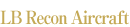
<style>
.page{position:relative;width:130px;height:27px;background:#ffffff}
.page>*{position:absolute;margin:0}
.t1{font:18px "RyuminPro-ExBold";letter-spacing:-0.08em;color:#c4a956;scale:0.92 1}
</style>
<div class="page">
<p class="t1" style="left:0px;top:10px;width:129px;height:15px">LB Recon Aircraft</p>
</div>
